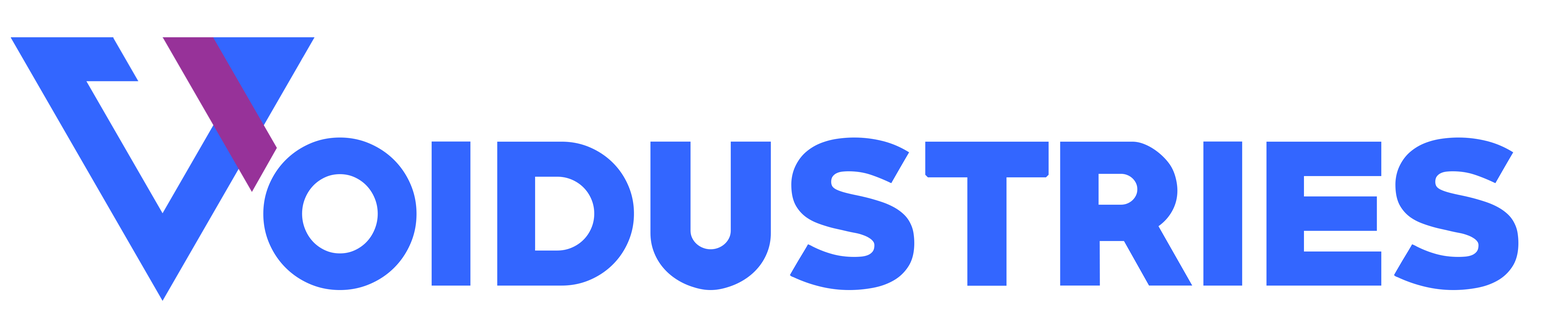
<style>
.page{position:relative;width:1568px;height:326px;background:#ffffff}
.page>*{position:absolute;margin:0}
.t1{font:185.6px "PRIMETIME-Regular";color:#3366ff}
</style>
<div class="page">
<p class="t1" style="left:263px;top:137px;width:1256px;height:153px">OIDUSTRIES</p>
</div>
